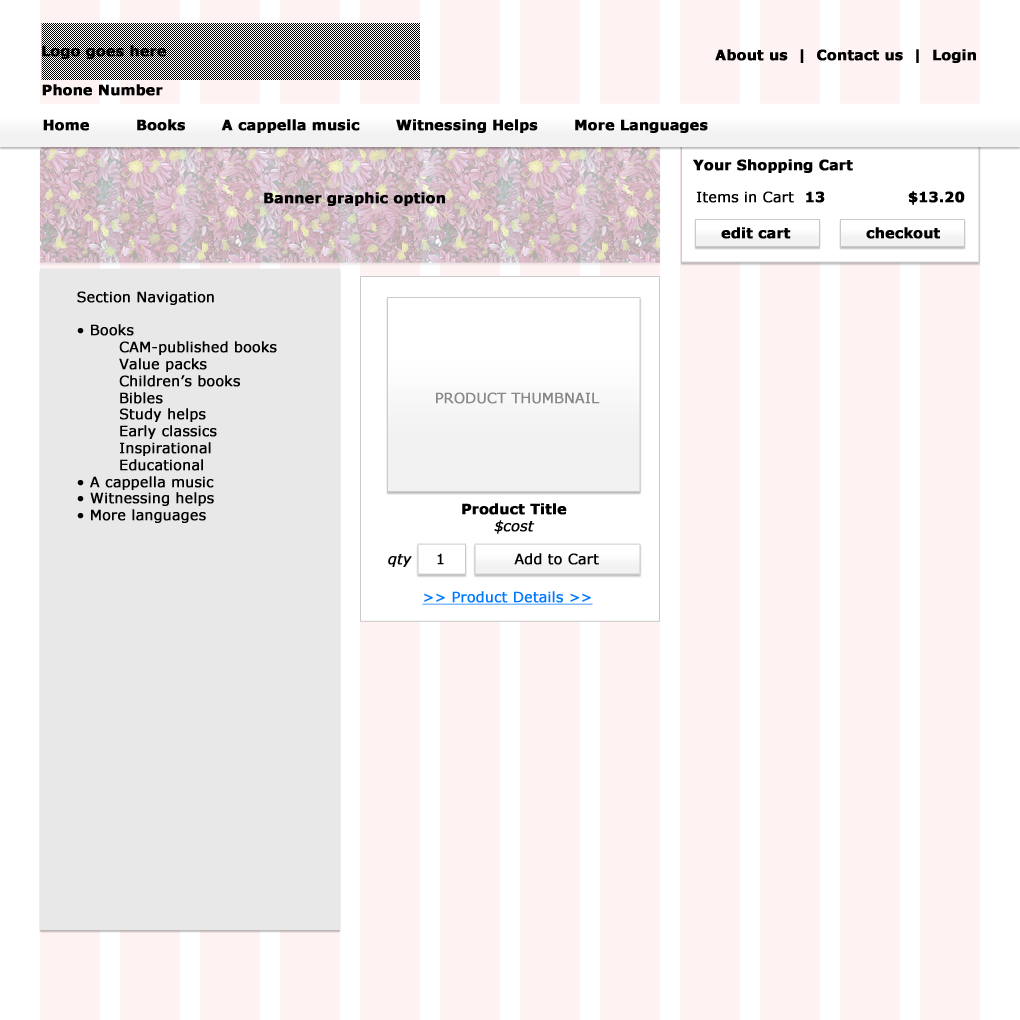
<style>
.page{position:relative;width:1020px;height:1020px;background:#ffffff}
.page>*{position:absolute;margin:0}
.t1{font:14px "Verdana-Bold";color:#000000;font-weight:bold}
.t2{font:14px "Verdana";color:#000000;font-weight:bold}
.t3{font:14px "Verdana";color:#888888;font-weight:bold}
.t4{font:14px "Verdana-Italic";color:#000000;font-weight:bold}
.t5{font:14px "Verdana";color:#0078ff;font-weight:bold;text-decoration:underline}
</style>
<div class="page">
<p class="t1" style="left:42px;top:45px;width:124px;height:14px">Logo goes here</p>
<p class="t1" style="left:715px;top:49px;width:261px;height:14px">About us  |  Contact us  |  Login</p>
<p class="t1" style="left:42px;top:84px;width:121px;height:12px">Phone Number</p>
<p class="t1" style="left:43px;top:119px;width:665px;height:14px">Home         Books       A cappella music       Witnessing Helps       More Languages</p>
<p class="t1" style="left:693px;top:159px;width:160px;height:14px">Your Shopping Cart</p>
<p class="t1" style="left:264px;top:192px;width:181px;height:14px">Banner graphic option</p>
<p class="t1" style="left:697px;top:191px;width:268px;height:14px"><span class="t2">Items in Cart  </span>13                $13.20</p>
<p class="t1" style="left:721px;top:227px;width:70px;height:12px">edit cart</p>
<p class="t1" style="left:866px;top:227px;width:74px;height:12px">checkout</p>
<p class="t2" style="left:77px;top:291px;width:200px;height:232px">Section Navigation<br><br>• Books<br>        CAM-published books<br>        Value packs<br>        Children’s books<br>        Bibles<br>        Study helps<br>        Early classics<br>        Inspirational<br>        Educational<br>• A cappella music<br>• Witnessing helps<br>• More languages</p>
<p class="t3" style="left:436px;top:392px;width:164px;height:12px">PRODUCT THUMBNAIL</p>
<p class="t1" style="left:462px;top:503px;width:105px;height:31px;text-align:center">Product Title<br><span class="t4">$cost</span></p>
<p class="t4" style="left:388px;top:554px;width:24px;height:13px">qty</p>
<p class="t2" style="left:437px;top:553px;width:7px;height:12px">1</p>
<p class="t2" style="left:514px;top:553px;width:85px;height:12px">Add to Cart</p>
<p class="t5" style="left:422px;top:591px;width:171px;height:14px">&gt;&gt; Product Details &gt;&gt;</p>
</div>
